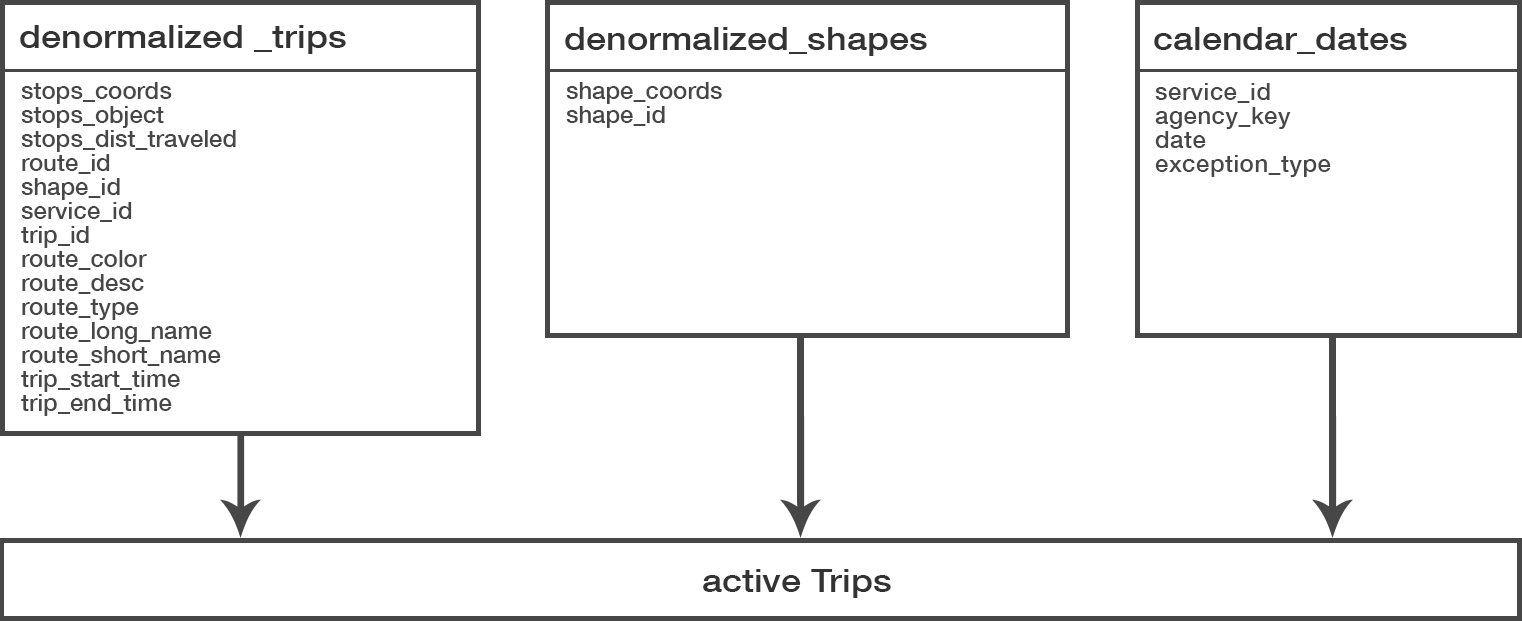
<style>
.page{position:relative;width:1522px;height:621px;background:#ffffff}
.page>*{position:absolute;margin:0}
.t1{font:32.4px "HelveticaNeue-Medium";color:#333333;scale:1.11 1}
.t2{font:24px/24px "HelveticaNeue-Medium";color:#474747}
.t3{font:24px/24px "HelveticaNeue-Medium";letter-spacing:0.02em;color:#474747}
</style>
<div class="page">
<p class="t1" style="left:20px;top:25px;width:326px;height:29px">denormalized _trips</p>
<p class="t1" style="left:565px;top:27px;width:362px;height:29px">denormalized_shapes</p>
<p class="t1" style="left:1154px;top:27px;width:253px;height:27px">calendar_dates</p>
<p class="t2" style="left:21px;top:82px;width:215px;height:334px">stops_coords<br>stops_object<br>stops_dist_traveled<br>route_id<br>shape_id<br>service_id<br>trip_id<br>route_color<br>route_desc<br>route_type<br>route_long_name<br>route_short_name<br>trip_start_time<br>trip_end_time</p>
<p class="t2" style="left:566px;top:82px;width:156px;height:46px">shape_coords<br>shape_id</p>
<p class="t3" style="left:1155px;top:83px;width:176px;height:94px">service_id<br>agency_key<br>date<br>exception_type</p>
<p class="t1" style="left:703px;top:569px;width:188px;height:29px">active Trips</p>
</div>
